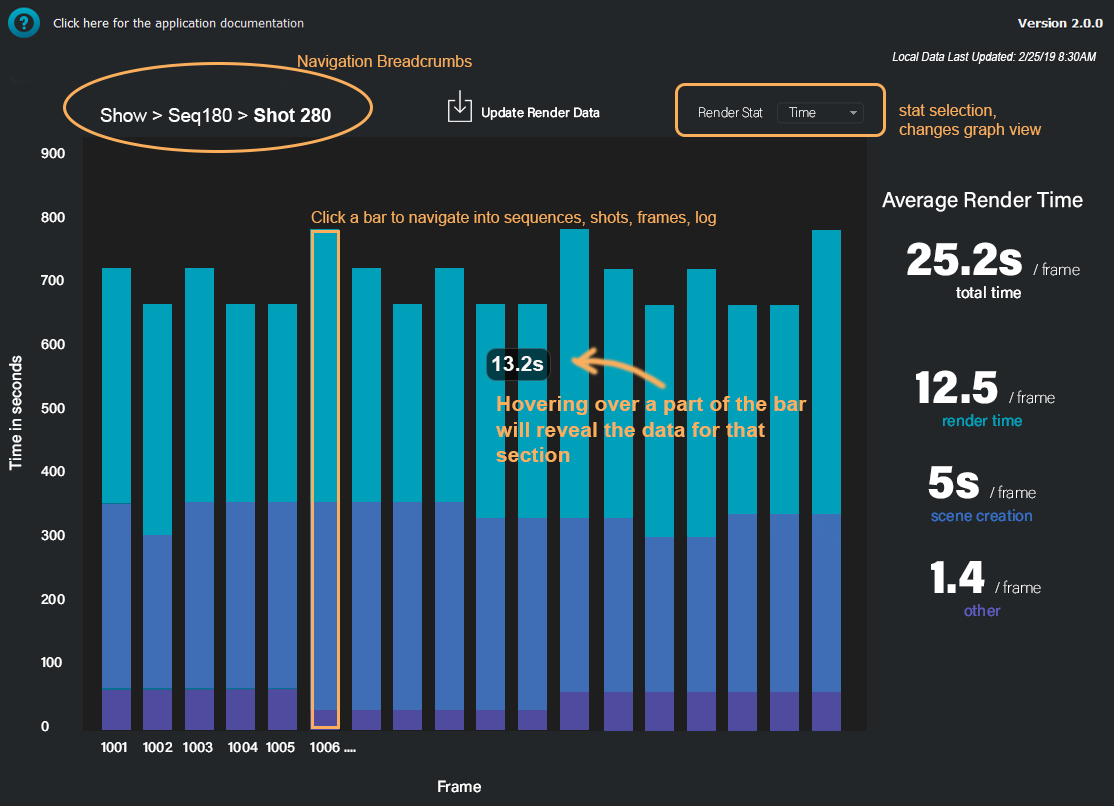
<style>
.page{position:relative;width:1114px;height:806px;background:#232629}
.page>*{position:absolute;margin:0}
.t1{font:13.3px "ArialNarrow";color:#ffffff;font-style:italic}
.t2{font:12px "ArialMT";color:#f8ad5c}
.t3{font:18.7px "ArialMT";color:#ffffff}
.t4{font:18.7px "Arial-BoldMT";color:#ffffff}
.t5{font:13.3px "AcuminConcept-Regular";color:#ffffff}
.t6{font:13.3px "AcuminConcept-Thin";color:#ffffff}
.t7{font:14.7px/63.7px "AcuminConcept-Regular";color:#ffffff}
.t8{font:21.3px "AcuminConcept-Regular";color:#ffffff}
.t9{font:48px "AcuminConcept-SemiCondensedBlack";color:#ffffff}
.t10{font:16px "TimesNewRomanPSMT";color:#ffffff}
.t11{font:16px "AcuminConcept-Thin";color:#ffffff}
.t12{font:16px "AcuminConcept-Regular";color:#ffffff}
.t13{font:12px "AcuminConcept-Regular";color:#ffffff}
.t14{font:21.3px "Arial-BoldMT";color:#f8f8f8}
.t15{font:21.3px "Arial-BoldMT";color:#fbaf5d}
.t16{font:16px "AcuminConcept-Regular";color:#00a0bb}
.t17{font:16px "AcuminConcept-Regular";color:#376ec1}
.t18{font:16px "AcuminConcept-Regular";color:#5e5bbe}
.t19{font:14.7px "AcuminConcept-Regular";color:#ffffff}
</style>
<div class="page">
<p class="t1" style="left:892px;top:52px;width:205px;height:12px">Local Data Last Updated: 2/25/19 8:30AM</p>
<p class="t2" style="left:298px;top:55px;width:174px;height:15px">Navigation Breadcrumbs</p>
<p class="t3" style="left:100px;top:108px;width:231px;height:18px">Show &gt; Seq180 &gt; <span class="t4">Shot 280</span></p>
<p class="t5" style="left:482px;top:107px;width:118px;height:13px">Update Render Data</p>
<p class="t6" style="left:699px;top:107px;width:64px;height:11px">Render Stat</p>
<p class="t6" style="left:789px;top:107px;width:27px;height:11px">Time</p>
<p class="t2" style="left:899px;top:104px;width:143px;height:34px">stat selection, <br>changes graph view</p>
<p class="t7" style="left:41px;top:148px;width:24px;height:584px">900<br>800<br>700<br>600<br>500<br>400<br>300<br>200<br>100<br>0</p>
<p class="t8" style="left:882px;top:191px;width:201px;height:21px">Average Render Time</p>
<p class="t2" style="left:311px;top:211px;width:405px;height:15px">Click a bar to navigate into sequences, shots, frames, log</p>
<p class="t9" style="left:907px;top:242px;width:173px;height:34px">25.2s <span class="t10">/ </span><span class="t11">frame</span></p>
<p class="t12" style="left:956px;top:286px;width:65px;height:13px">total time</p>
<p class="t13" style="left:9px;top:355px;width:13px;height:116px;rotate:-90deg">Time in seconds</p>
<p class="t14" style="left:492px;top:356px;width:52px;height:15px">13.2s</p>
<p class="t11" style="left:916px;top:370px;width:139px;height:34px"><span class="t9">12.5 </span><span class="t10">/ </span>frame</p>
<p class="t15" style="left:496px;top:396px;width:311px;height:66px">Hovering over a part of the bar<br>will reveal the data for that<br>section</p>
<p class="t16" style="left:943px;top:414px;width:79px;height:13px">render time</p>
<p class="t11" style="left:928px;top:466px;width:108px;height:33px"><span class="t9">5s </span><span class="t10">/ </span>frame</p>
<p class="t17" style="left:931px;top:509px;width:101px;height:13px">scene creation</p>
<p class="t11" style="left:931px;top:561px;width:110px;height:33px"><span class="t9">1.4 </span><span class="t10">/ </span>frame</p>
<p class="t18" style="left:964px;top:604px;width:37px;height:13px">other</p>
<p class="t19" style="left:101px;top:742px;width:255px;height:11px">1001    1002   1003    1004  1005    1006 ....</p>
<p class="t13" style="left:438px;top:780px;width:43px;height:13px">Frame</p>
</div>
